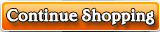
<style>
.page{position:relative;width:160px;height:32px}
.page>*{position:absolute;margin:0}
.t1{font:17px "EdwardianMediumLetPlain";color:#ffffff;font-weight:bold}
</style>
<div class="page">
<p class="t1" style="left:7px;top:8px;width:148px;height:17px">Continue Shopping</p>
</div>
